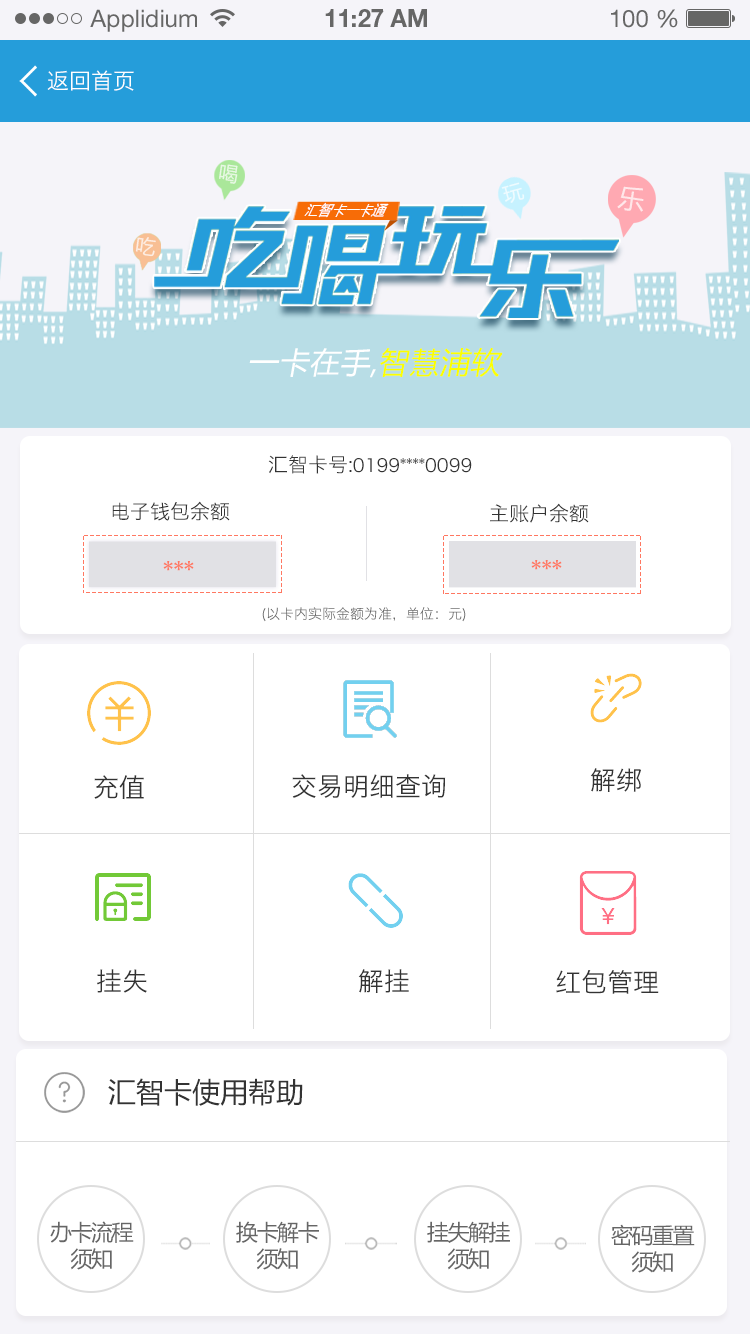
<style>
.page{position:relative;width:750px;height:1334px;background:#ffffff}
.page>*{position:absolute;margin:0}
.t1{font:24px "HelveticaNeueLTStd-Roman";color:#666666}
.t2{font:24px "HelveticaNeueLTStd-Bd";color:#666666}
.t3{font:22px "HiraginoSansGB-W3";color:#ffffff;text-transform:uppercase}
.t4{font:19.9px "MicrosoftYaHei";letter-spacing:0.02em;color:#e8f8e4}
.t5{font:19.9px "MicrosoftYaHei";letter-spacing:0.02em;color:#ffffff}
.t6{font:26.7px "MicrosoftYaHei";letter-spacing:0.02em;color:#ffffff}
.t7{font:15.8px "MicrosoftYaHei";letter-spacing:0.02em;color:#ffffff;scale:0.82 1}
.t8{font:20px "MicrosoftYaHei";letter-spacing:0.02em;color:#fdede2}
.t9{font:30px "MicrosoftYaHei";letter-spacing:0.02em;color:#ffffff;font-style:italic}
.t10{font:30px "MicrosoftYaHei";letter-spacing:0.02em;color:#fcff00;font-style:italic}
.t11{font:18px "HiraginoSansGB-W3";color:#333333;text-transform:uppercase}
.t12{font:20px "HiraginoSansGB-W3";color:#333333;text-transform:uppercase}
.t13{font:30px "HiraginoSansGB-W3";color:#ff7761;text-transform:uppercase}
.t14{font:14px "HiraginoSansGB-W3";color:#666666;text-transform:uppercase}
.t15{font:26px "HiraginoSansGB-W3";color:#333333;text-transform:uppercase}
.t16{font:28px "MicrosoftYaHei";color:#333333;text-transform:uppercase}
.t17{font:22px "MicrosoftYaHei";letter-spacing:-0.065em;color:#666666}
</style>
<div class="page">
<p class="t1" style="left:90px;top:9px;width:107px;height:23px">Applidium</p>
<p class="t2" style="left:325px;top:9px;width:102px;height:18px">11:27 AM</p>
<p class="t1" style="left:611px;top:9px;width:67px;height:19px">100 %</p>
<p class="t3" style="left:47px;top:70px;width:87px;height:21px">返回首页</p>
<p class="t4" style="left:219px;top:164px;width:19px;height:20px;rotate:8deg">喝</p>
<p class="t5" style="left:501px;top:182px;width:24px;height:21px;rotate:-15deg;opacity:0.7">玩</p>
<p class="t6" style="left:617px;top:186px;width:27px;height:26px;rotate:8deg;opacity:0.7">乐</p>
<p class="t7" style="left:304px;top:202px;width:85px;height:16px">汇智卡一卡通</p>
<p class="t8" style="left:135px;top:237px;width:21px;height:20px;rotate:8deg">吃</p>
<p class="t9" style="left:249px;top:347px;width:254px;height:31px">一卡在手,<span class="t10">智慧浦软</span></p>
<p class="t11" style="left:268px;top:455px;width:204px;height:19px"><span class="t12">汇智卡号:</span>0199****0099</p>
<p class="t12" style="left:112px;top:501px;width:118px;height:20px">电子钱包余额</p>
<p class="t12" style="left:490px;top:503px;width:99px;height:20px">主账户余额</p>
<p class="t13" style="left:163px;top:561px;width:31px;height:10px">***</p>
<p class="t13" style="left:531px;top:560px;width:31px;height:10px">***</p>
<p class="t14" style="left:262px;top:607px;width:204px;height:15px">(以卡内实际金额为准，单位：元)</p>
<p class="t15" style="left:292px;top:774px;width:154px;height:24px">交易明细查询</p>
<p class="t15" style="left:590px;top:768px;width:51px;height:24px">解绑</p>
<p class="t15" style="left:94px;top:775px;width:50px;height:25px">充值</p>
<p class="t15" style="left:97px;top:969px;width:50px;height:24px">挂失</p>
<p class="t15" style="left:358px;top:969px;width:51px;height:24px">解挂</p>
<p class="t15" style="left:556px;top:970px;width:103px;height:24px">红包管理</p>
<p class="t16" style="left:108px;top:1078px;width:195px;height:28px">汇智卡使用帮助</p>
<p class="t17" style="left:50px;top:1221px;width:84px;height:49px;text-align:center">办卡流程<br>须知</p>
<p class="t17" style="left:236px;top:1221px;width:83px;height:49px;text-align:center">换卡解卡<br>须知</p>
<p class="t17" style="left:427px;top:1221px;width:83px;height:49px;text-align:center">挂失解挂<br>须知</p>
<p class="t17" style="left:611px;top:1224px;width:84px;height:49px;text-align:center">密码重置<br>须知</p>
</div>
